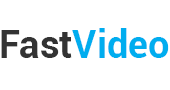
<style>
.page{position:relative;width:170px;height:90px;background:#ffffff}
.page>*{position:absolute;margin:0}
.t1{font:38px "Roboto-Bold";color:#00adef}
.t2{font:38px "Roboto-Bold";color:#333333}
</style>
<div class="page">
<p class="t1" style="left:1px;top:28px;width:168px;height:30px"><span class="t2">Fast</span>Video</p>
</div>
